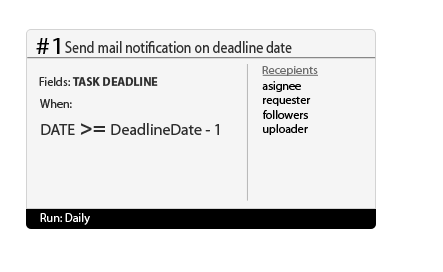
<style>
.page{position:relative;width:443px;height:272px;background:#f5f5f5}
.page>*{position:absolute;margin:0}
.t1{font:23.4px "MyriadPro-Regular";color:#000000;scale:1.25 1}
.t2{font:16.7px "MyriadPro-Regular";color:#313131;scale:0.83 1}
.t3{font:12px "MyriadPro-Bold";color:#2e2e2e}
.t4{font:12px "MyriadPro-Regular";color:#2e2e2e}
.t5{font:11.5px "MyriadPro-Regular";color:#6d6d6d;scale:1.07 1}
.t6{font:12px "MyriadPro-Regular";color:#000000}
.t7{font:16px "MyriadPro-Regular";color:#2e2e2e}
.t8{font:22px "MyriadPro-Bold";color:#2e2e2e}
.t9{font:12px "MyriadPro-Regular";color:#ffffff}
</style>
<div class="page">
<p class="t1" style="left:36px;top:38px;width:24px;height:16px">#1</p>
<p class="t2" style="left:65px;top:41px;width:227px;height:12px">Send mail notification on deadline date</p>
<p class="t3" style="left:39px;top:77px;width:119px;height:9px"><span class="t4">Fields: </span>TASK DEADLINE</p>
<p class="t5" style="left:262px;top:66px;width:56px;height:10px">Recepients</p>
<p class="t6" style="left:262px;top:81px;width:49px;height:54px">asignee<br>requester<br>followers<br>uploader</p>
<p class="t7" style="left:40px;top:99px;width:179px;height:36px"><span class="t4">When:   <br></span>DATE <span class="t8">&gt;= </span>DeadlineDate - 1</p>
<p class="t9" style="left:40px;top:213px;width:50px;height:12px">Run: Daily</p>
</div>
